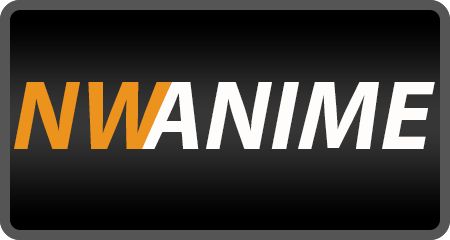
<style>
.page{position:relative;width:450px;height:240px}
.page>*{position:absolute;margin:0}
.t1{font:100px "MyriadPro-BoldIt";color:#ec931d}
.t2{font:100px "MyriadPro-BoldIt";color:#fffcfc}
</style>
<div class="page">
<p class="t1" style="left:14px;top:82px;width:158px;height:67px">NW</p>
<p class="t2" style="left:139px;top:82px;width:296px;height:67px">ANIME</p>
</div>
